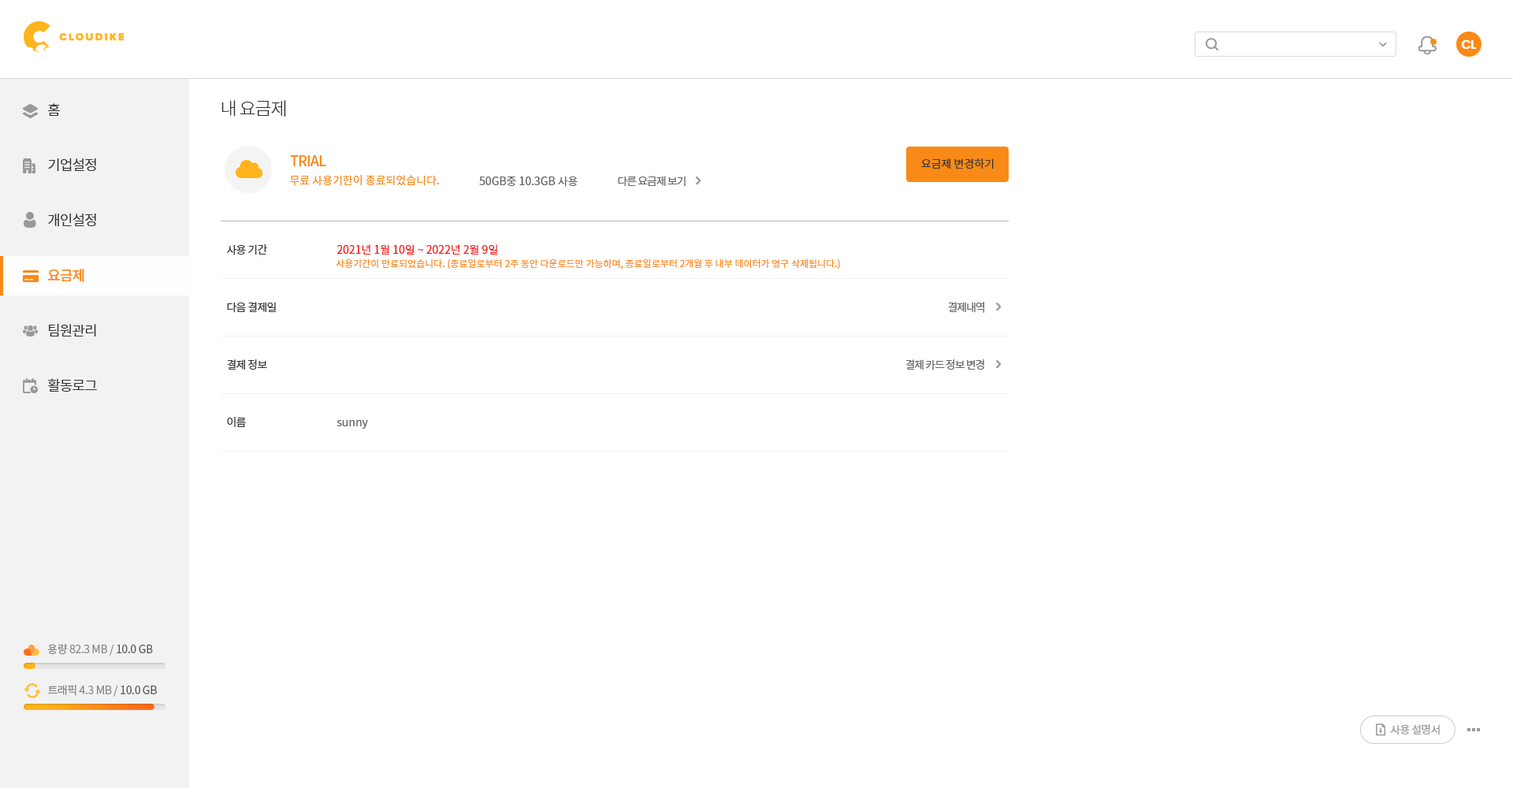
<style>
.page{position:relative;width:1513px;height:788px;background:#ffffff}
.page>*{position:absolute;margin:0}
.t1{font:12.6px "Poppins-SemiBold";letter-spacing:-0.05em;color:#ffffff}
.t2{font:18.1px "NotoSansCJKkr-Light";letter-spacing:-0.05em;color:#333333}
.t3{font:14.2px/55.2px "NotoSansCJKkr-DemiLight";letter-spacing:-0.05em;color:#333333}
.t4{font:14.2px/55.2px "NotoSansCJKkr-Medium";letter-spacing:-0.05em;color:#f98a17}
.t5{font:14.2px "NotoSansCJKkr-Medium";letter-spacing:-0.05em;color:#f98a17}
.t6{font:11px "NotoSansCJKkr-DemiLight";color:#333333}
.t7{font:11px "NotoSansCJKkr-Regular";color:#f98a17}
.t8{font:11px "NotoSansCJKkr-Regular";color:#666666}
.t9{font:11px "NotoSansCJKkr-Regular";letter-spacing:-0.075em;color:#666666}
.t10{font:11px "NotoSansCJKkr-Regular";letter-spacing:-0.05em;color:#333333}
.t11{font:11px "NotoSansCJKkr-Regular";color:#f61616}
.t12{font:9.5px "NotoSansCJKkr-Regular";color:#f98a17}
.t13{font:11px "NotoSansCJKkr-Regular";letter-spacing:-0.025em;color:#888888}
.t14{font:11px "NotoSansCJKkr-Regular";letter-spacing:-0.025em;color:#585858}
.t15{font:11px "NotoSansCJKkr-Regular";letter-spacing:-0.05em;color:#999999}
</style>
<div class="page">
<p class="t1" style="left:1461px;top:39px;width:16px;height:10px">CL</p>
<p class="t2" style="left:221px;top:100px;width:65px;height:17px">내 요금제</p>
<p class="t3" style="left:47px;top:103px;width:50px;height:289px">홈<br>기업설정<br>개인설정<br><span class="t4">요금제<br></span>팀원관리<br>활동로그</p>
<p class="t5" style="left:290px;top:155px;width:36px;height:11px">TRIAL</p>
<p class="t6" style="left:921px;top:158px;width:73px;height:11px">요금제 변경하기</p>
<p class="t7" style="left:290px;top:175px;width:149px;height:11px">무료 사용기한이 종료되었습니다.</p>
<p class="t8" style="left:479px;top:177px;width:99px;height:10px">50GB중 10.3GB 사용</p>
<p class="t9" style="left:618px;top:176px;width:68px;height:11px">다른 요금제 보기</p>
<p class="t10" style="left:227px;top:244px;width:40px;height:11px">사용 기간</p>
<p class="t11" style="left:337px;top:244px;width:160px;height:11px">2021년 1월 10일 ~ 2022년 2월 9일</p>
<p class="t12" style="left:336px;top:258px;width:504px;height:12px">사용기간이 만료되었습니다. (종료일로부터 2주 동안 다운로드만 가능하며, 종료일로부터 2개월 후 내부 데이터가 영구 삭제됩니다.)</p>
<p class="t10" style="left:227px;top:302px;width:49px;height:11px">다음 결제일</p>
<p class="t9" style="left:948px;top:302px;width:36px;height:11px">결제내역</p>
<p class="t10" style="left:227px;top:359px;width:40px;height:11px">결제 정보</p>
<p class="t9" style="left:905px;top:359px;width:79px;height:11px">결제 카드 정보 변경</p>
<p class="t10" style="left:227px;top:417px;width:19px;height:10px">이름</p>
<p class="t8" style="left:337px;top:420px;width:31px;height:9px">sunny</p>
<p class="t13" style="left:47px;top:644px;width:106px;height:12px">용량 82.3 MB / <span class="t14">10.0 GB</span></p>
<p class="t13" style="left:48px;top:685px;width:109px;height:12px">트래픽 4.3 MB / <span class="t14">10.0 GB</span></p>
<p class="t15" style="left:1390px;top:724px;width:50px;height:11px">사용 설명서</p>
</div>
